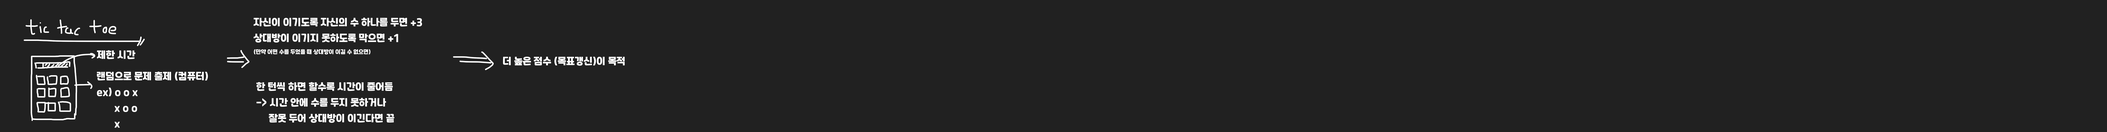
<style>
.page{position:relative;width:2107px;height:132px;background:#212121}
.page>*{position:absolute;margin:0}
.t1{font:9px "RecipekoreaM";color:#ffffff}
.t2{font:5.1px "RecipekoreaM";color:#ffffff}
</style>
<div class="page">
<p class="t1" style="left:254px;top:18px;width:168px;height:36px">자신이 이기도록 자신의 수 하나를 두면 +3<br>상대방이 이기지 못하도록 막으면 +1<br><span class="t2">(만약 어떤 수를 두었을 때 상대방이 이길 수 없으면)</span></p>
<p class="t1" style="left:97px;top:50px;width:38px;height:9px">제한 시간</p>
<p class="t1" style="left:503px;top:56px;width:122px;height:10px">더 높은 점수 (목표갱신)이 목적</p>
<p class="t1" style="left:97px;top:71px;width:111px;height:56px">랜덤으로 문제 출제 (컴퓨터)<br>ex) o o x<br>       x o o<br>       x</p>
<p class="t1" style="left:256px;top:82px;width:138px;height:41px">한 턴씩 하면 할수록 시간이 줄어듬<br>-&gt; 시간 안에 수를 두지 못하거나<br>     잘못 두어 상대방이 이긴다면 끝</p>
</div>
